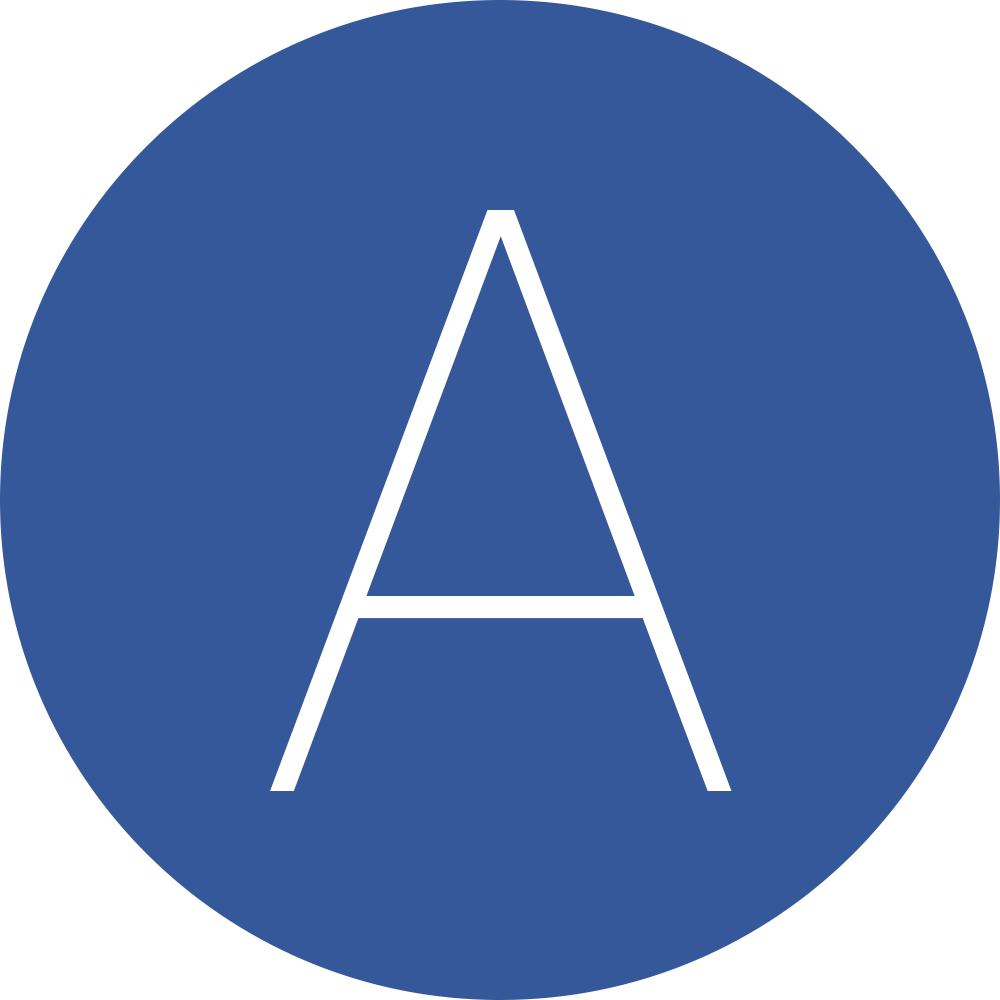
<style>
.page{position:relative;width:1000px;height:1000px;background:#34589a}
.page>*{position:absolute;margin:0}
.t1{font:816.7px "Roboto-Thin";color:#ffffff}
</style>
<div class="page">
<p class="t1" style="left:270px;top:210px;width:462px;height:581px">A</p>
</div>
